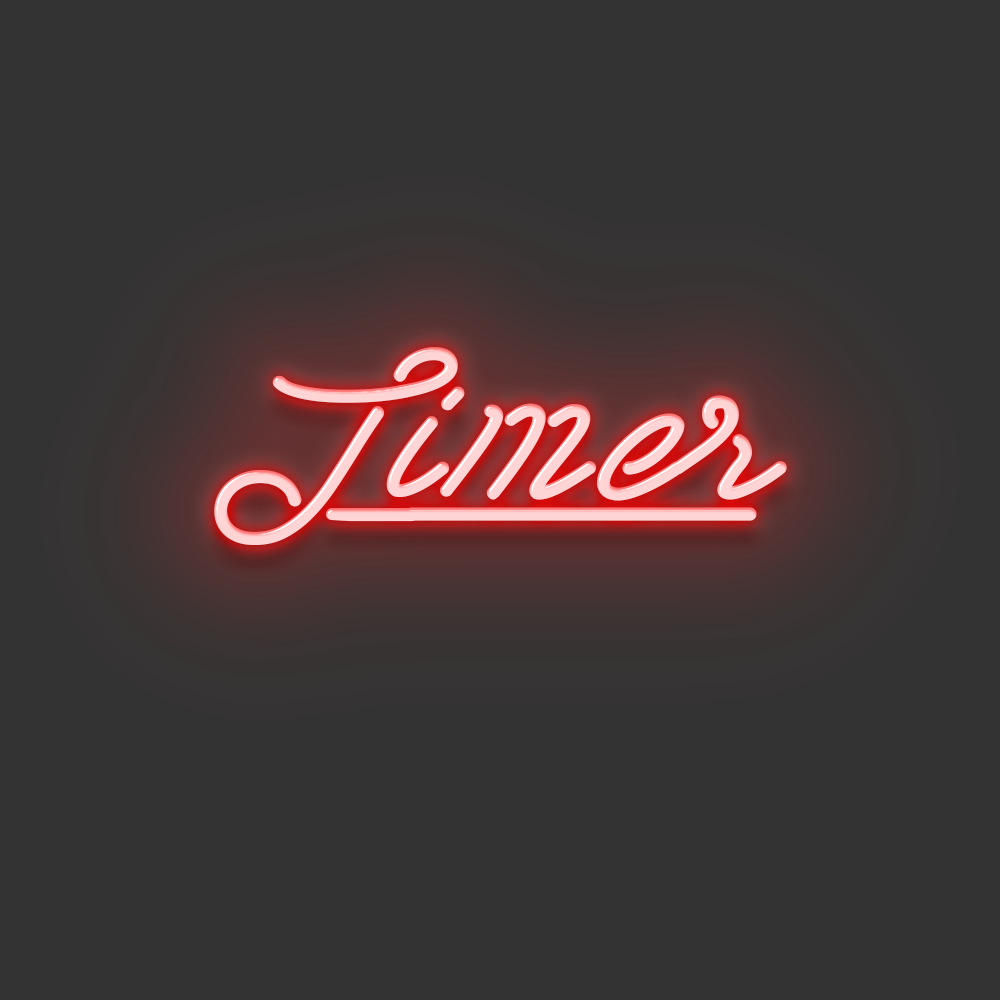
<style>
.page{position:relative;width:1000px;height:1000px;background:#333333}
.page>*{position:absolute;margin:0}
.t1{font:250px "LasEnterPersonalUseOnly";color:#ffd4d4}
</style>
<div class="page">
<p class="t1" style="left:214px;top:347px;width:573px;height:198px">Timer</p>
</div>
